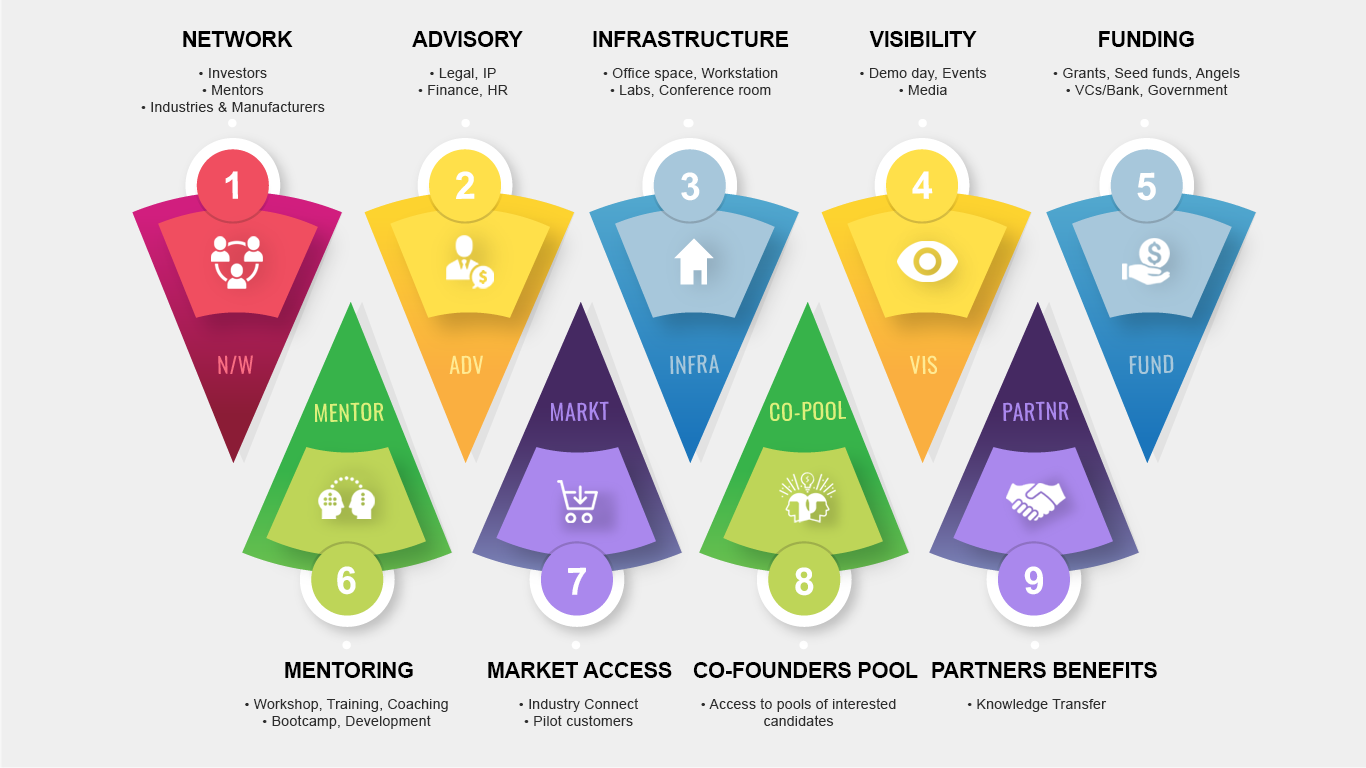
<style>
.page{position:relative;width:1366px;height:768px;background:#efefef}
.page>*{position:absolute;margin:0}
.t1{font:22px "Arial-BoldMT";letter-spacing:-0.02em;color:#000000}
.t2{font:14px "ArialMT";letter-spacing:0.02em;color:#2d2d2d}
.t3{font:38px "Arial-BoldMT";letter-spacing:-0.04em;color:#ffffff}
.t4{font:22.3px "Oswald-Regular";letter-spacing:0.02em;color:#f96e83}
.t5{font:22.3px "Oswald-Regular";letter-spacing:0.02em;color:#ffea92}
.t6{font:22.3px "Oswald-Regular";letter-spacing:0.02em;color:#a7c7db}
.t7{font:22.3px "Oswald-Regular";letter-spacing:0.02em;color:#aa88ed}
.t8{font:22.3px "Oswald-Regular";letter-spacing:0.02em;color:#deef7b}
</style>
<div class="page">
<p class="t1" style="left:183px;top:31px;width:110px;height:16px">NETWORK</p>
<p class="t1" style="left:412px;top:31px;width:111px;height:16px">ADVISORY</p>
<p class="t1" style="left:593px;top:31px;width:196px;height:16px">INFRASTRUCTURE</p>
<p class="t1" style="left:869px;top:31px;width:108px;height:16px">VISIBILITY</p>
<p class="t1" style="left:1099px;top:31px;width:95px;height:16px">FUNDING</p>
<p class="t2" style="left:141px;top:67px;width:184px;height:45px;text-align:center">• Investors<br>• Mentors<br>• Industries &amp; Manufacturers</p>
<p class="t2" style="left:418px;top:68px;width:90px;height:29px;text-align:center">• Legal, IP<br>• Finance, HR</p>
<p class="t2" style="left:603px;top:67px;width:175px;height:30px;text-align:center">• Office space, Workstation<br>• Labs, Conference room</p>
<p class="t2" style="left:860px;top:67px;width:127px;height:28px;text-align:center">• Demo day, Events<br>• Media</p>
<p class="t2" style="left:1053px;top:67px;width:187px;height:30px;text-align:center">• Grants, Seed funds, Angels<br>• VCs/Bank, Government</p>
<p class="t3" style="left:225px;top:171px;width:13px;height:28px">1</p>
<p class="t3" style="left:456px;top:171px;width:19px;height:28px">2</p>
<p class="t3" style="left:681px;top:172px;width:19px;height:29px">3</p>
<p class="t3" style="left:912px;top:171px;width:21px;height:28px">4</p>
<p class="t3" style="left:1137px;top:172px;width:19px;height:29px">5</p>
<p class="t4" style="left:218px;top:355px;width:35px;height:19px">N/W</p>
<p class="t5" style="left:449px;top:355px;width:34px;height:19px">ADV</p>
<p class="t6" style="left:670px;top:354px;width:50px;height:20px">INFRA</p>
<p class="t5" style="left:909px;top:355px;width:28px;height:19px">VIS</p>
<p class="t6" style="left:1129px;top:354px;width:45px;height:20px">FUND</p>
<p class="t7" style="left:551px;top:401px;width:58px;height:20px">MARKT</p>
<p class="t8" style="left:770px;top:401px;width:76px;height:20px">CO-POOL</p>
<p class="t7" style="left:1003px;top:401px;width:66px;height:20px">PARTNR</p>
<p class="t8" style="left:315px;top:402px;width:69px;height:20px">MENTOR</p>
<p class="t3" style="left:337px;top:566px;width:19px;height:29px">6</p>
<p class="t3" style="left:568px;top:567px;width:18px;height:28px">7</p>
<p class="t3" style="left:795px;top:567px;width:19px;height:29px">8</p>
<p class="t3" style="left:1024px;top:566px;width:19px;height:29px">9</p>
<p class="t1" style="left:285px;top:662px;width:128px;height:16px">MENTORING</p>
<p class="t1" style="left:488px;top:662px;width:184px;height:16px">MARKET ACCESS</p>
<p class="t1" style="left:693px;top:662px;width:225px;height:16px">CO-FOUNDERS POOL</p>
<p class="t1" style="left:932px;top:662px;width:225px;height:16px">PARTNERS BENEFITS</p>
<p class="t2" style="left:245px;top:699px;width:203px;height:30px;text-align:center">• Workshop, Training, Coaching<br>• Bootcamp, Development</p>
<p class="t2" style="left:519px;top:698px;width:120px;height:28px;text-align:center">• Industry Connect<br>• Pilot customers</p>
<p class="t2" style="left:701px;top:698px;width:195px;height:28px;text-align:center">• Access to pools of interested candidates</p>
<p class="t2" style="left:967px;top:699px;width:140px;height:13px">• Knowledge Transfer</p>
</div>
